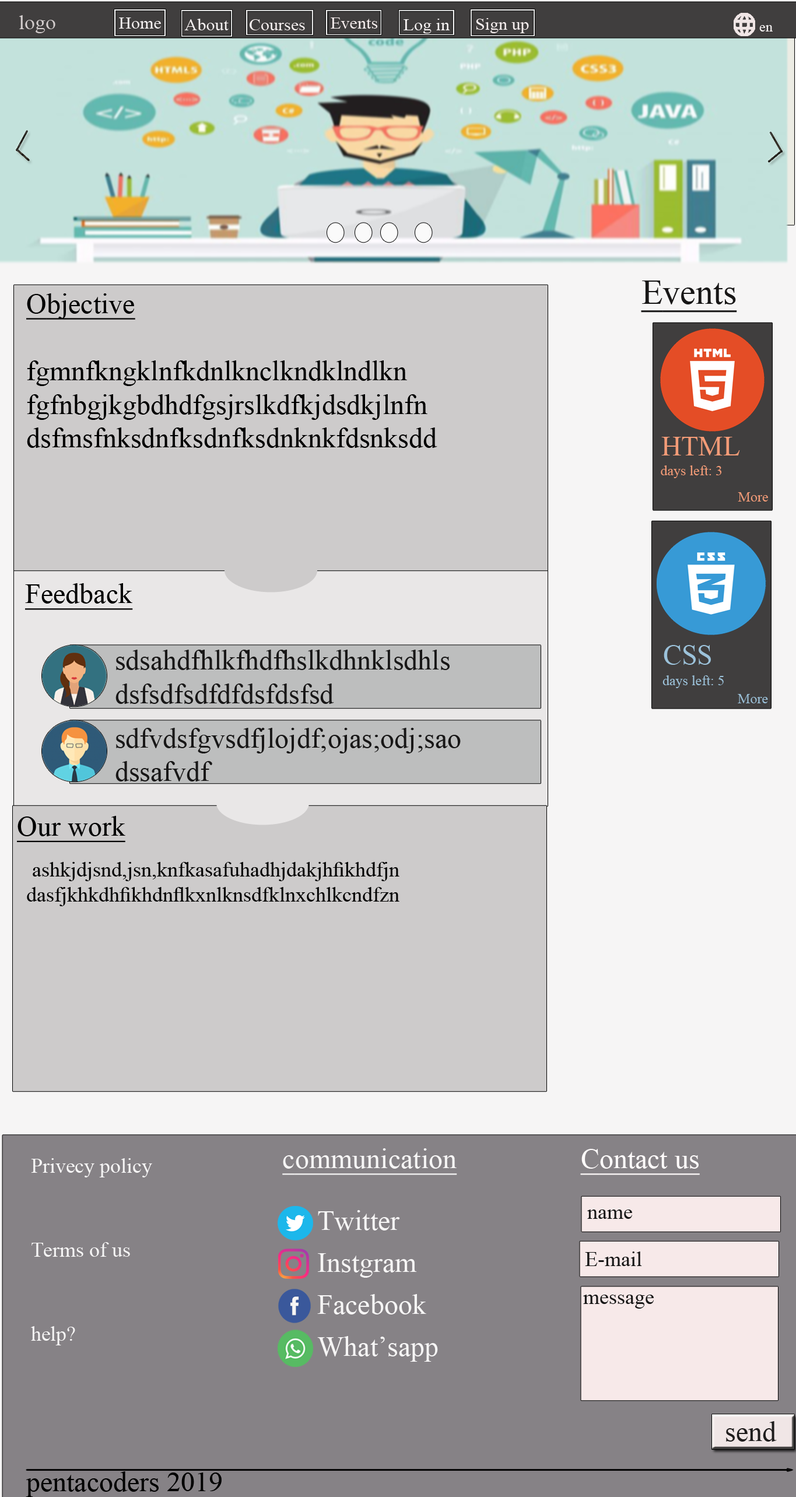
<style>
.page{position:relative;width:796px;height:1497px;background:#cdcbcb}
.page>*{position:absolute;margin:0}
.t1{font:20.1px "TimesNewRomanPSMT";color:#d4cece;scale:1.05 1}
.t2{font:16.7px "TimesNewRomanPSMT";color:#f8f4f4;scale:1.05 1}
.t3{font:16.7px "TimesNewRomanPSMT";color:#f7eeee;scale:1.05 1}
.t4{font:16.7px "TimesNewRomanPSMT";color:#f6f2f2;scale:1.05 1}
.t5{font:16.7px "TimesNewRomanPSMT";color:#f9f2f2;scale:1.05 1}
.t6{font:16.7px "TimesNewRomanPSMT";color:#faf6f6;scale:1.05 1}
.t7{font:16.7px "TimesNewRomanPSMT";color:#f7efef;scale:1.05 1}
.t8{font:13.4px "TimesNewRomanPSMT";color:#f8f4f4;scale:1.05 1}
.t9{font:35px "TimesNewRomanPSMT";color:#181717;text-decoration:underline}
.t10{font:28px "TimesNewRomanPSMT";color:#000000}
.t11{font:28px "TimesNewRomanPSMT";color:#000000;text-decoration:underline}
.t12{font:28px "TimesNewRomanPSMT";color:#f39b77}
.t13{font:14px "TimesNewRomanPSMT";color:#f39b77}
.t14{font:28px "TimesNewRomanPSMT";color:#181717}
.t15{font:28px "TimesNewRomanPSMT";color:#9cc2da}
.t16{font:14px "TimesNewRomanPSMT";color:#9cc2da}
.t17{font:21px "TimesNewRomanPSMT";color:#000000}
.t18{font:28px "TimesNewRomanPSMT";color:#f6f5f5;text-decoration:underline}
.t19{font:28px "TimesNewRomanPSMT";color:#fffbfb;text-decoration:underline}
.t20{font:21px/42px "TimesNewRomanPSMT";color:#f6f5f5}
.t21{font:28px/42px "TimesNewRomanPSMT";color:#f6f5f5}
.t22{font:21px "TimesNewRomanPSMT";color:#181717}
.t23{font:28px "TimesNewRomanPSMT";color:#1f1d1d}
</style>
<div class="page">
<p class="t1" style="left:19px;top:15px;width:36px;height:18px">logo</p>
<p class="t2" style="left:119px;top:18px;width:42px;height:11px">Home</p>
<p class="t3" style="left:331px;top:18px;width:47px;height:11px">Events</p>
<p class="t4" style="left:184px;top:19px;width:45px;height:11px">About</p>
<p class="t5" style="left:250px;top:19px;width:55px;height:11px">Courses</p>
<p class="t6" style="left:404px;top:19px;width:46px;height:15px">Log in</p>
<p class="t7" style="left:476px;top:18px;width:53px;height:15px">Sign up</p>
<p class="t8" style="left:760px;top:25px;width:13px;height:7px">en</p>
<p class="t9" style="left:641px;top:281px;width:96px;height:32px">Events</p>
<p class="t10" style="left:26px;top:293px;width:412px;height:155px;text-align:right"><span class="t11">Objective<br></span><br>fgmnfkngklnfkdnlknclkndklndlkn<br> fgfnbgjkgbdhdfgsjrslkdfkjdsdkjlnfn<br>dsfmsfnksdnfksdnfksdnknkfdsnksdd</p>
<p class="t12" style="left:662px;top:437px;width:78px;height:19px">HTML</p>
<p class="t13" style="left:661px;top:466px;width:61px;height:12px">days left: 3</p>
<p class="t13" style="left:738px;top:492px;width:30px;height:10px">More</p>
<p class="t11" style="left:25px;top:583px;width:108px;height:27px">Feedback</p>
<p class="t14" style="left:116px;top:650px;width:334px;height:54px;text-align:right">sdsahdfhlkfhdfhslkdhnklsdhls<br>dsfsdfsdfdfdsfdsfsd</p>
<p class="t15" style="left:664px;top:645px;width:47px;height:20px">CSS</p>
<p class="t16" style="left:663px;top:676px;width:61px;height:12px">days left: 5</p>
<p class="t16" style="left:738px;top:694px;width:30px;height:10px">More</p>
<p class="t14" style="left:116px;top:728px;width:345px;height:54px;text-align:right">sdfvdsfgvsdfjlojdf;ojas;odj;sao<br>dssafvdf</p>
<p class="t11" style="left:17px;top:816px;width:108px;height:26px">Our work</p>
<p class="t17" style="left:27px;top:862px;width:373px;height:45px">ashkjdjsnd,jsn,knfkasafuhadhjdakjhfikhdfjn<br>dasfjkhkdhfikhdnflkxnlknsdfklnxchlkcndfzn</p>
<p class="t18" style="left:282px;top:1149px;width:175px;height:26px">communication</p>
<p class="t19" style="left:580px;top:1149px;width:120px;height:26px">Contact us</p>
<p class="t20" style="left:31px;top:1159px;width:121px;height:187px;text-align:right">Privecy policy<br><br>Terms of us<br><br>?help</p>
<p class="t21" style="left:317px;top:1210px;width:121px;height:152px;text-align:right">Twitter<br>Instgram<br>Facebook<br>What’sapp</p>
<p class="t22" style="left:587px;top:1210px;width:45px;height:9px">name</p>
<p class="t22" style="left:585px;top:1252px;width:57px;height:14px">E-mail</p>
<p class="t22" style="left:583px;top:1295px;width:71px;height:14px">message</p>
<p class="t23" style="left:726px;top:1422px;width:51px;height:20px">send</p>
<p class="t10" style="left:26px;top:1472px;width:196px;height:25px">pentacoders 2019</p>
</div>
